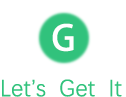
<style>
.page{position:relative;width:126px;height:97px;background:#ffffff}
.page>*{position:absolute;margin:0}
.t1{font:35px "AdobeHeitiStd-Regular";color:#feffff}
.t2{font:24px "DengXian";color:#31c27c}
</style>
<div class="page">
<p class="t1" style="left:52px;top:23px;width:22px;height:29px">G</p>
<p class="t2" style="left:2px;top:79px;width:120px;height:18px">Let’s  Get  It</p>
</div>
